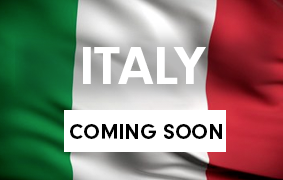
<style>
.page{position:relative;width:283px;height:180px}
.page>*{position:absolute;margin:0}
.t1{font:56px "NeuzeitGro-Bol";color:#ffffff;text-transform:uppercase}
.t2{font:22px "NeuzeitGro-Bol";color:#000000}
</style>
<div class="page">
<p class="t1" style="left:83px;top:47px;width:123px;height:37px">ITALY</p>
<p class="t2" style="left:70px;top:124px;width:152px;height:16px">COMING SOON</p>
</div>
